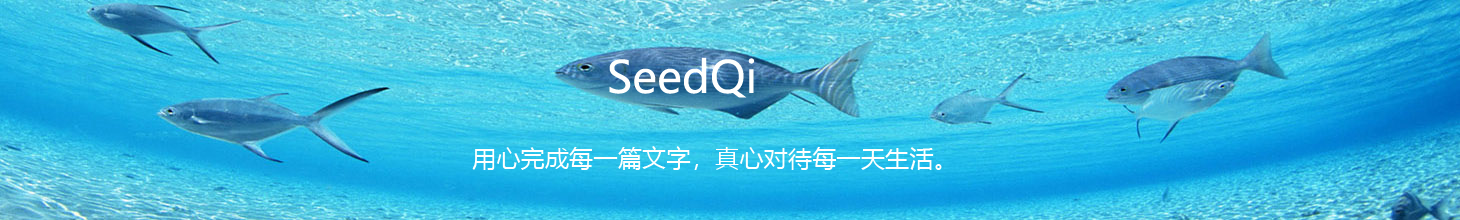
<style>
.page{position:relative;width:1460px;height:220px}
.page>*{position:absolute;margin:0}
.t1{font:43.8px "MicrosoftYaHei";color:#fefffe}
.t2{font:24.3px "MicrosoftYaHei";color:#fefffe}
</style>
<div class="page">
<p class="t1" style="left:609px;top:57px;width:146px;height:41px">SeedQi</p>
<p class="t2" style="left:472px;top:146px;width:470px;height:24px">用心完成每一篇文字，真心对待每一天生活。</p>
</div>
